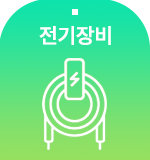
<style>
.page{position:relative;width:150px;height:160px}
.page>*{position:absolute;margin:0}
.t1{font:21.3px "Pretendard-SemiBold";color:#ffffff}
</style>
<div class="page">
<p class="t1" style="left:39px;top:26px;width:72px;height:19px">전기장비</p>
</div>
